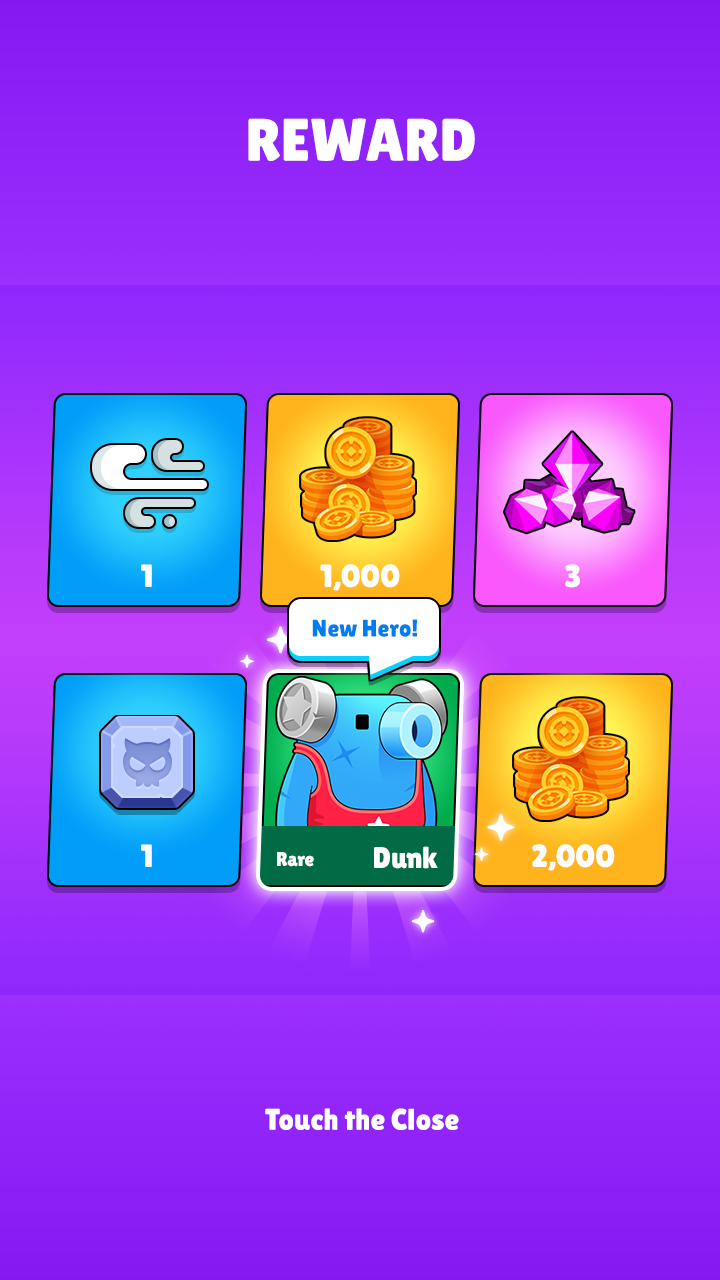
<style>
.page{position:relative;width:720px;height:1280px}
.page>*{position:absolute;margin:0}
.t1{font:60px "LilitaOne";color:#ffffff;text-transform:uppercase}
.t2{font:32px "LilitaOne";color:#ffffff}
.t3{font:24px "LilitaOne";color:#007def}
.t4{font:30px "LilitaOne";color:#ffffff}
.t5{font:20px "LilitaOne";color:#ffffff}
</style>
<div class="page">
<p class="t1" style="left:248px;top:118px;width:227px;height:43px">Reward</p>
<p class="t2" style="left:141px;top:564px;width:11px;height:23px">1</p>
<p class="t2" style="left:320px;top:564px;width:80px;height:27px">1,000</p>
<p class="t2" style="left:565px;top:564px;width:15px;height:24px">3</p>
<p class="t3" style="left:312px;top:619px;width:105px;height:18px">New Hero!</p>
<p class="t2" style="left:141px;top:844px;width:11px;height:23px">1</p>
<p class="t4" style="left:374px;top:846px;width:64px;height:23px">Dunk</p>
<p class="t2" style="left:532px;top:844px;width:83px;height:27px">2,000</p>
<p class="t5" style="left:277px;top:852px;width:37px;height:15px">Rare</p>
<p class="t4" style="left:265px;top:1108px;width:194px;height:22px">Touch the Close</p>
</div>
